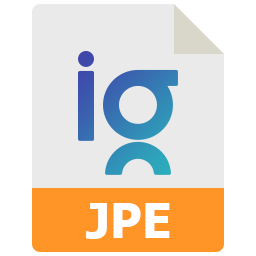
<style>
.page{position:relative;width:256px;height:256px;background:#eaeaea}
.page>*{position:absolute;margin:0}
.t1{font:48px "Tahoma-Bold";color:#ffffff}
</style>
<div class="page">
<p class="t1" style="left:86px;top:203px;width:84px;height:36px">JPE</p>
</div>
